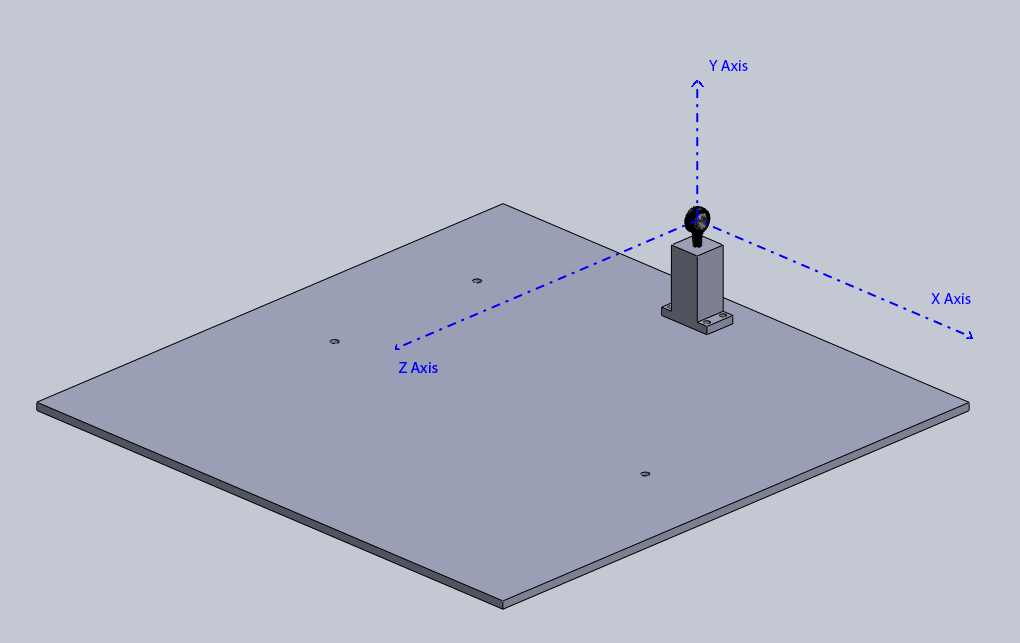
<style>
.page{position:relative;width:1020px;height:643px;background:#c3c8d2}
.page>*{position:absolute;margin:0}
.t1{font:16px "MyriadPro-Regular";color:#0000ff}
.t2{font:12px "MyriadPro-Regular";color:#0000ff}
</style>
<div class="page">
<p class="t1" style="left:709px;top:60px;width:39px;height:11px">Y Axis</p>
<p class="t2" style="left:931px;top:293px;width:40px;height:11px">X Axis</p>
</div>
